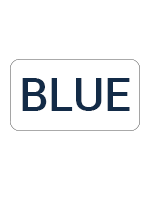
<style>
.page{position:relative;width:150px;height:200px;background:#ffffff}
.page>*{position:absolute;margin:0}
.t1{font:45.9px "Roboto-Medium";color:#132b47}
</style>
<div class="page">
<p class="t1" style="left:22px;top:78px;width:108px;height:33px">BLUE</p>
</div>
